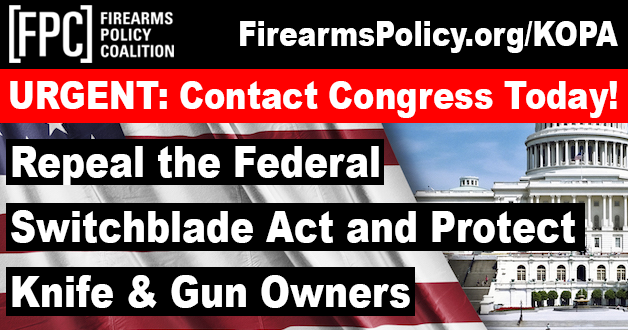
<style>
.page{position:relative;width:628px;height:330px;background:#000000}
.page>*{position:absolute;margin:0}
.t1{font:33.6px "Arial-Black";color:#ffffff;scale:0.83 1}
.t2{font:38.4px "Arial-Black";color:#ffffff;scale:0.83 1}
.t3{font:43.2px/65px "Arial-Black";color:#ffffff;scale:0.83 1}
</style>
<div class="page">
<p class="t1" style="left:240px;top:21px;width:378px;height:32px">FirearmsPolicy.org/KOPA</p>
<p class="t2" style="left:10px;top:81px;width:607px;height:37px">URGENT: Contact Congress Today!</p>
<p class="t3" style="left:11px;top:146px;width:564px;height:162px">Repeal the Federal <br>Switchblade Act and Protect <br>Knife &amp; Gun Owners</p>
</div>
